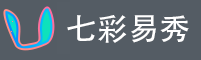
<style>
.page{position:relative;width:201px;height:60px;background:#545c64}
.page>*{position:absolute;margin:0}
.t1{font:31px "AdobeHeitiStd-Regular";color:#ffffff}
</style>
<div class="page">
<p class="t1" style="left:67px;top:15px;width:122px;height:28px">七彩易秀</p>
</div>
